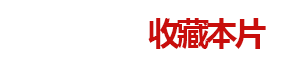
<style>
.page{position:relative;width:300px;height:75px;background:#ffffff}
.page>*{position:absolute;margin:0}
.t1{font:32px "MicrosoftYaHei-Bold";letter-spacing:-0.1em;color:#c80e0c}
</style>
<div class="page">
<p class="t1" style="left:148px;top:18px;width:118px;height:31px">收藏本片</p>
</div>
